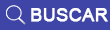
<style>
.page{position:relative;width:110px;height:30px;background:#3e45a6}
.page>*{position:absolute;margin:0}
.t1{font:18px "ArialMT";color:#ffffff;font-weight:bold}
</style>
<div class="page">
<p class="t1" style="left:31px;top:8px;width:77px;height:14px">BUSCAR</p>
</div>
